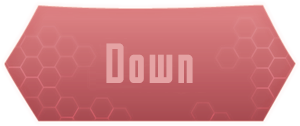
<style>
.page{position:relative;width:300px;height:126px}
.page>*{position:absolute;margin:0}
.t1{font:48px "sao";letter-spacing:0.08em;color:#e5a3a4}
</style>
<div class="page">
<p class="t1" style="left:106px;top:43px;width:87px;height:40px">Down</p>
</div>
